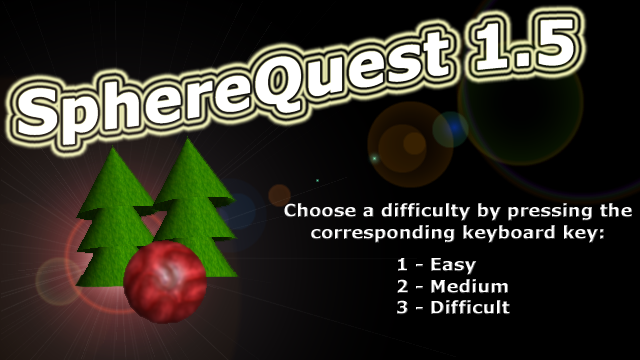
<style>
.page{position:relative;width:640px;height:360px;background:#000000}
.page>*{position:absolute;margin:0}
.t1{font:60px "Verdana-Bold";color:#ffffff}
.t2{font:18px "Verdana-Bold";color:#ffffff}
</style>
<div class="page">
<p class="t1" style="left:18px;top:20px;width:556px;height:125px">SphereQuest 1.5</p>
<p class="t2" style="left:284px;top:203px;width:348px;height:40px;text-align:center">Choose a difficulty by pressing the<br>corresponding keyboard key:</p>
<p class="t2" style="left:397px;top:258px;width:113px;height:57px">1 - Easy<br>2 - Medium<br>3 - Difficult</p>
</div>
